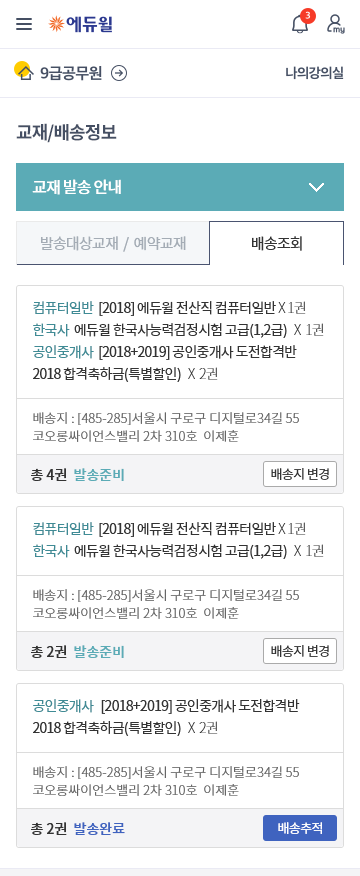
<style>
.page{position:relative;width:360px;height:876px;background:#ffffff}
.page>*{position:absolute;margin:0}
.t1{font:18px "NotoSansCJKkr-Bold";letter-spacing:-0.05em;color:#454f63}
.t2{font:16px "NotoSansCJKkr-Medium";letter-spacing:-0.05em;color:#ffffff}
.t3{font:15px "NotoSansCJKkr-Regular";letter-spacing:-0.05em;color:#a4acb5}
.t4{font:15px "NotoSansCJKkr-Regular";letter-spacing:-0.05em;color:#333333}
.t5{font:14px/22px "NotoSansCJKkr-Regular";letter-spacing:-0.05em;color:#333333}
.t6{font:14px/22px "NotoSansCJKkr-Regular";letter-spacing:-0.05em;color:#3f8b95}
.t7{font:14px/22px "NotoSansCJKkr-Thin";letter-spacing:-0.05em;color:#333333}
.t8{font:13px/18px "NotoSansCJKkr-Light";color:#666666}
.t9{font:14px "NotoSansCJKkr-Medium";color:#333333}
.t10{font:14px "NotoSansCJKkr-Medium";color:#5babb6}
.t11{font:13px "NotoSansCJKkr-Regular";letter-spacing:-0.05em;color:#333333}
.t12{font:14px "NotoSansCJKkr-Medium";color:#3f63bf}
.t13{font:13px "NotoSansCJKkr-Regular";letter-spacing:-0.05em;color:#ffffff}
</style>
<div class="page">
<p class="t1" style="left:16px;top:123px;width:101px;height:20px">교재/배송정보</p>
<p class="t2" style="left:32px;top:179px;width:89px;height:16px">교재 발송 안내</p>
<p class="t3" style="left:41px;top:236px;width:145px;height:16px">발송대상교재  /  예약교재</p>
<p class="t4" style="left:252px;top:236px;width:50px;height:15px">배송조회</p>
<p class="t5" style="left:33px;top:301px;width:291px;height:81px"><span class="t6">컴퓨터일반  </span>[2018] 에듀윌 전산직 컴퓨터일반 <span class="t7">X 1권<br></span><span class="t6">한국사</span>  에듀윌 한국사능력검정시험 고급(1,2급) <span class="t7">  X  1권<br></span><span class="t6">공인중개사  </span>[2018+2019] 공인중개사 도전합격반<br>2018 합격축하금(특별할인) <span class="t7">  X  2권</span></p>
<p class="t8" style="left:33px;top:412px;width:266px;height:30px">배송지 : [485-285]서울시 구로구 디지털로34길 55 <br>코오롱싸이언스밸리 2차 310호  이제훈</p>
<p class="t9" style="left:31px;top:468px;width:93px;height:13px">총 4권  <span class="t10">발송준비</span></p>
<p class="t11" style="left:271px;top:468px;width:58px;height:12px">배송지 변경</p>
<p class="t5" style="left:33px;top:522px;width:291px;height:37px"><span class="t6">컴퓨터일반  </span>[2018] 에듀윌 전산직 컴퓨터일반 <span class="t7">X 1권<br></span><span class="t6">한국사</span>  에듀윌 한국사능력검정시험 고급(1,2급) <span class="t7">  X  1권</span></p>
<p class="t8" style="left:33px;top:589px;width:266px;height:30px">배송지 : [485-285]서울시 구로구 디지털로34길 55 <br>코오롱싸이언스밸리 2차 310호  이제훈</p>
<p class="t9" style="left:31px;top:645px;width:93px;height:13px">총 2권  <span class="t10">발송준비</span></p>
<p class="t11" style="left:271px;top:645px;width:58px;height:12px">배송지 변경</p>
<p class="t5" style="left:33px;top:699px;width:267px;height:37px"><span class="t6">공인중개사   </span>[2018+2019] 공인중개사 도전합격반<br>2018 합격축하금(특별할인) <span class="t7">  X  2권</span></p>
<p class="t8" style="left:33px;top:766px;width:266px;height:30px">배송지 : [485-285]서울시 구로구 디지털로34길 55 <br>코오롱싸이언스밸리 2차 310호  이제훈</p>
<p class="t9" style="left:31px;top:822px;width:94px;height:13px">총 2권  <span class="t12">발송완료</span></p>
<p class="t13" style="left:278px;top:822px;width:44px;height:12px">배송추적</p>
</div>
